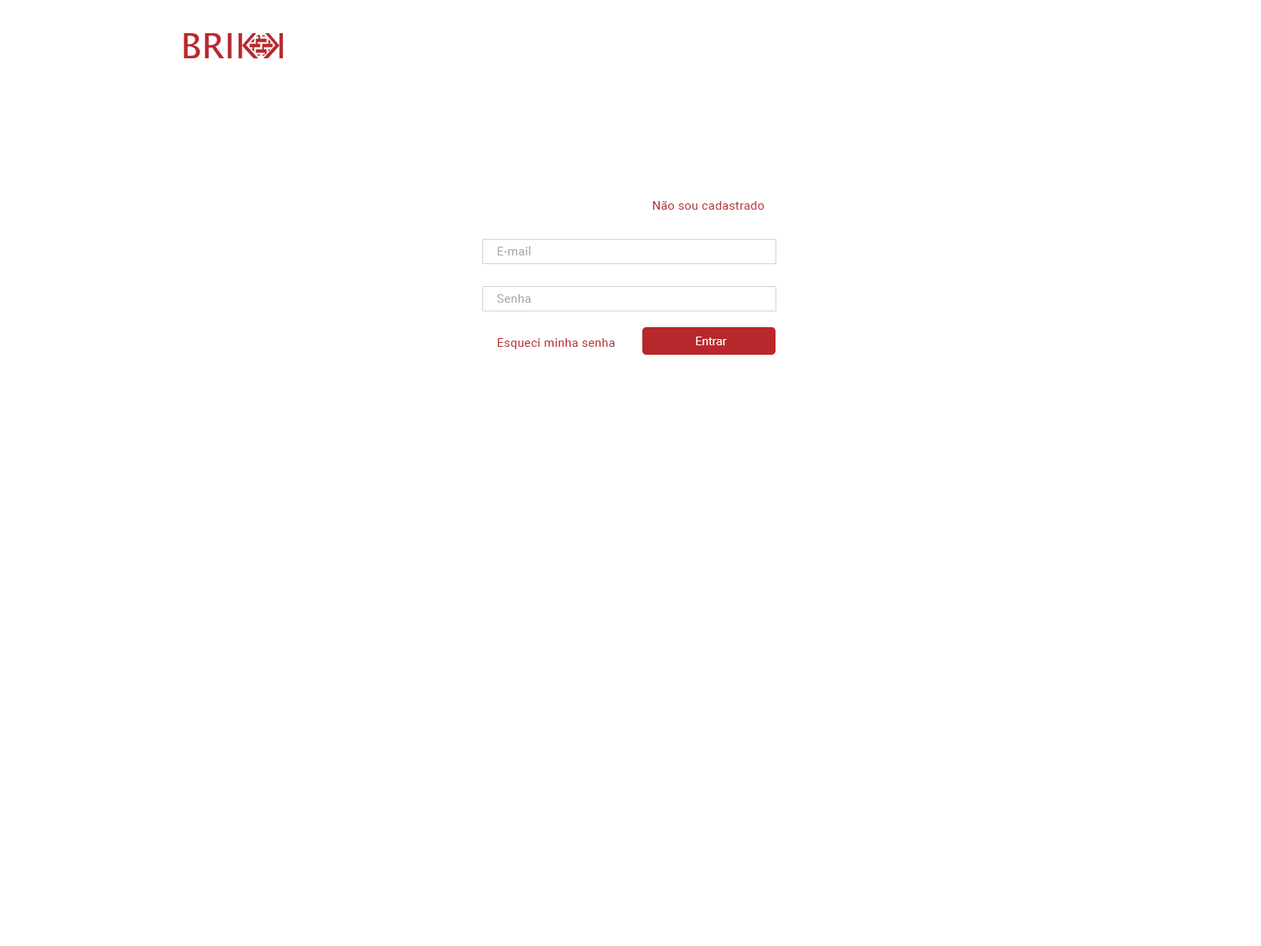
<style>
.page{position:relative;width:1261px;height:946px;background:#ffffff}
.page>*{position:absolute;margin:0}
.t1{font:11.8px "Roboto-Regular";letter-spacing:0.03em;color:#b8272c}
.t2{font:11.8px "Roboto-Regular";letter-spacing:0.03em;color:#a4a4a4}
.t3{font:11.8px "Roboto-Regular";color:#ffffff}
</style>
<div class="page">
<p class="t1" style="left:653px;top:201px;width:111px;height:9px">Não sou cadastrado</p>
<p class="t2" style="left:497px;top:246px;width:33px;height:9px">E-mail</p>
<p class="t2" style="left:497px;top:294px;width:34px;height:9px">Senha</p>
<p class="t1" style="left:497px;top:338px;width:118px;height:11px">Esqueci minha senha</p>
<p class="t3" style="left:696px;top:337px;width:31px;height:8px">Entrar</p>
</div>
